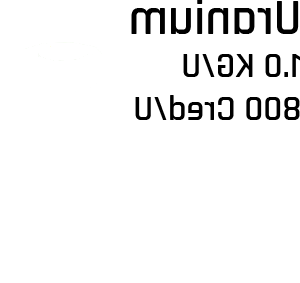
<style>
.page{position:relative;width:300px;height:283px;background:#ffffff}
.page>*{position:absolute;margin:0}
.t1{font:36px "Rajdhani-SemiBold";color:#000000}
.t2{font:50px "Rajdhani-SemiBold";color:#000000}
</style>
<div class="page">
<p class="t1" style="left:131px;top:0px;width:170px;height:120px;rotate:180deg"><span class="t2">Uranium<br></span>1.0 KG/U<br>800 Cred/U</p>
</div>
